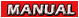
<style>
.page{position:relative;width:79px;height:18px;background:#e71515}
.page>*{position:absolute;margin:0}
.t1{font:15px "ErasITC-Bold";scale:0.96 1}
</style>
<div class="page">
<p class="t1" style="left:7px;top:4px;width:68px;height:11px">MANUAL</p>
</div>
